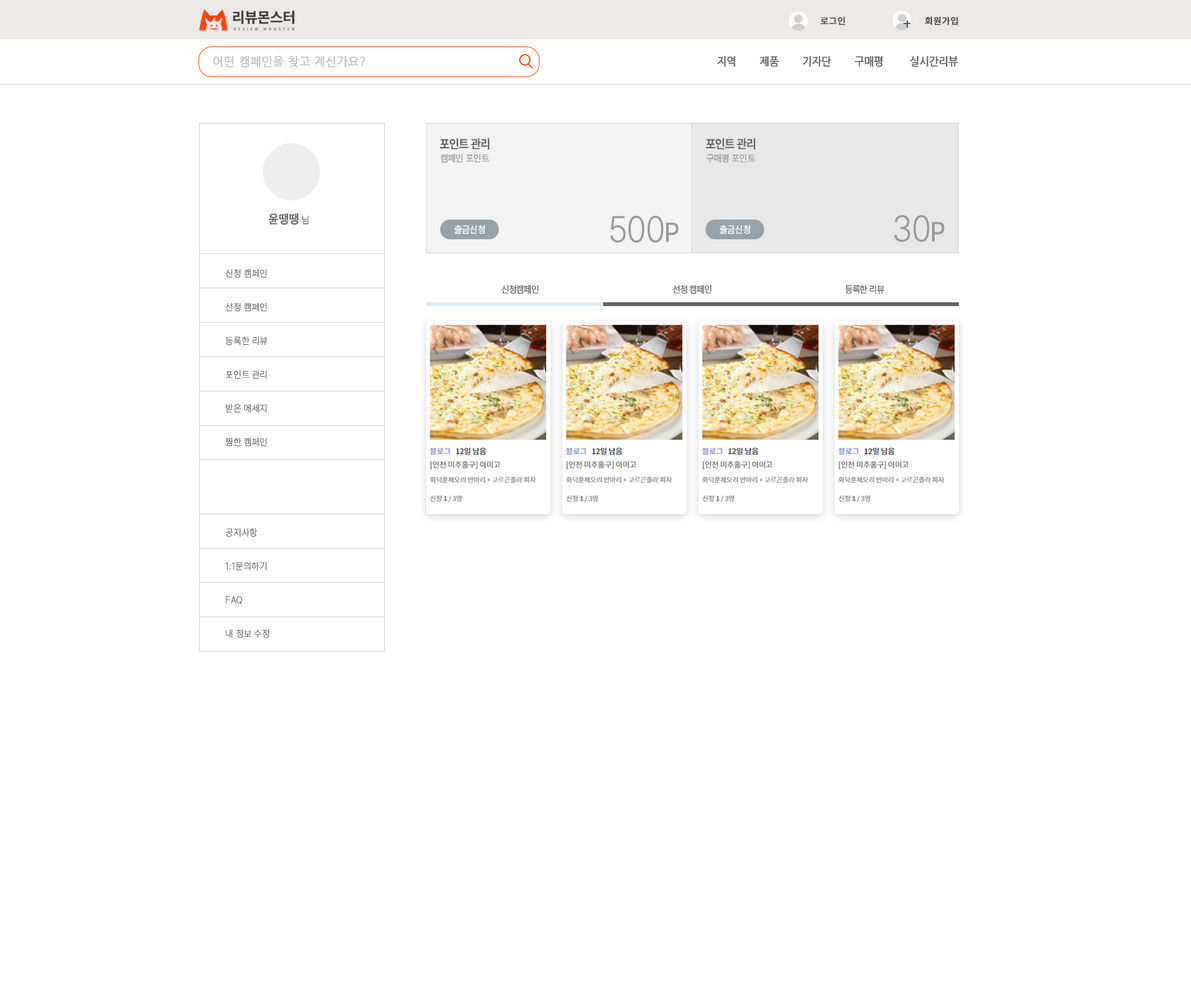
<style>
.page{position:relative;width:1191px;height:1001px;background:#ffffff}
.page>*{position:absolute;margin:0}
.t1{font:8.9px "NotoSansKR-Regular";letter-spacing:0.02em;color:#333333;font-weight:bold}
.t2{font:11.5px "NanumGothic";letter-spacing:0.02em;color:#c2c1c1;font-weight:bold}
.t3{font:11.2px "NanumGothic";letter-spacing:-0.02em;color:#575757;font-weight:bold;scale:0.91 1}
.t4{font:12.6px "Pretendard-SemiBold";letter-spacing:-0.04em;color:#616161;font-weight:bold;scale:0.91 1}
.t5{font:9.8px "Pretendard-ExtraLight";color:#989898;font-weight:bold;scale:0.91 1}
.t6{font:12.6px "Pretendard-SemiBold";letter-spacing:0.02em;color:#616161;font-weight:bold;scale:0.91 1}
.t7{font:9.8px "Pretendard-ExtraLight";letter-spacing:0.02em;color:#616161;font-weight:bold;scale:0.91 1}
.t8{font:36.4px "Pretendard-ExtraLight";letter-spacing:-0.02em;color:#989898;font-weight:bold;scale:0.91 1}
.t9{font:27.3px "Pretendard-Regular";letter-spacing:-0.02em;color:#989898;font-weight:bold;scale:0.91 1}
.t10{font:9.8px "Pretendard-Light";color:#ffffff;font-weight:bold;scale:0.91 1}
.t11{font:9.8px/33.7px "Pretendard-Thin";letter-spacing:0.02em;color:#616161;font-weight:bold;scale:0.91 1}
.t12{font:9.8px "Pretendard-ExtraLight";letter-spacing:-0.04em;color:#616161;font-weight:bold;scale:0.91 1}
</style>
<div class="page">
<p class="t1" style="left:820px;top:17px;width:26px;height:8px">로그인</p>
<p class="t1" style="left:925px;top:17px;width:33px;height:8px">회원가입</p>
<p class="t2" style="left:213px;top:55px;width:152px;height:12px">어떤 캠페인을 찾고 계신가요?</p>
<p class="t3" style="left:717px;top:56px;width:241px;height:11px">지역        제품        기자단        구매평         실시간리뷰</p>
<p class="t4" style="left:440px;top:138px;width:49px;height:12px">포인트 관리</p>
<p class="t4" style="left:706px;top:138px;width:49px;height:12px">포인트 관리</p>
<p class="t5" style="left:440px;top:154px;width:49px;height:9px">캠페인 포인트</p>
<p class="t5" style="left:706px;top:154px;width:49px;height:9px">구매평 포인트</p>
<p class="t6" style="left:269px;top:213px;width:40px;height:12px">윤땡땡 <span class="t7">님</span></p>
<p class="t8" style="left:610px;top:216px;width:69px;height:26px">500<span class="t9">P</span></p>
<p class="t8" style="left:894px;top:215px;width:51px;height:27px">30<span class="t9">P</span></p>
<p class="t10" style="left:454px;top:225px;width:31px;height:9px">출금신청</p>
<p class="t10" style="left:720px;top:225px;width:30px;height:9px">출금신청</p>
<p class="t11" style="left:225px;top:269px;width:42px;height:178px">신청 캠페인<br>선정 캠페인<br>등록한 리뷰<br>포인트 관리<br>받은 메세지<br>찜한 캠페인</p>
<p class="t12" style="left:501px;top:285px;width:38px;height:9px">신청캠페인</p>
<p class="t12" style="left:673px;top:285px;width:39px;height:9px">선정 캠페인</p>
<p class="t12" style="left:845px;top:285px;width:40px;height:9px">등록한 리뷰</p>
<p class="t11" style="left:225px;top:528px;width:44px;height:110px">공지사항<br>1:1문의하기<br>FAQ<br>내 정보 수정</p>
</div>
